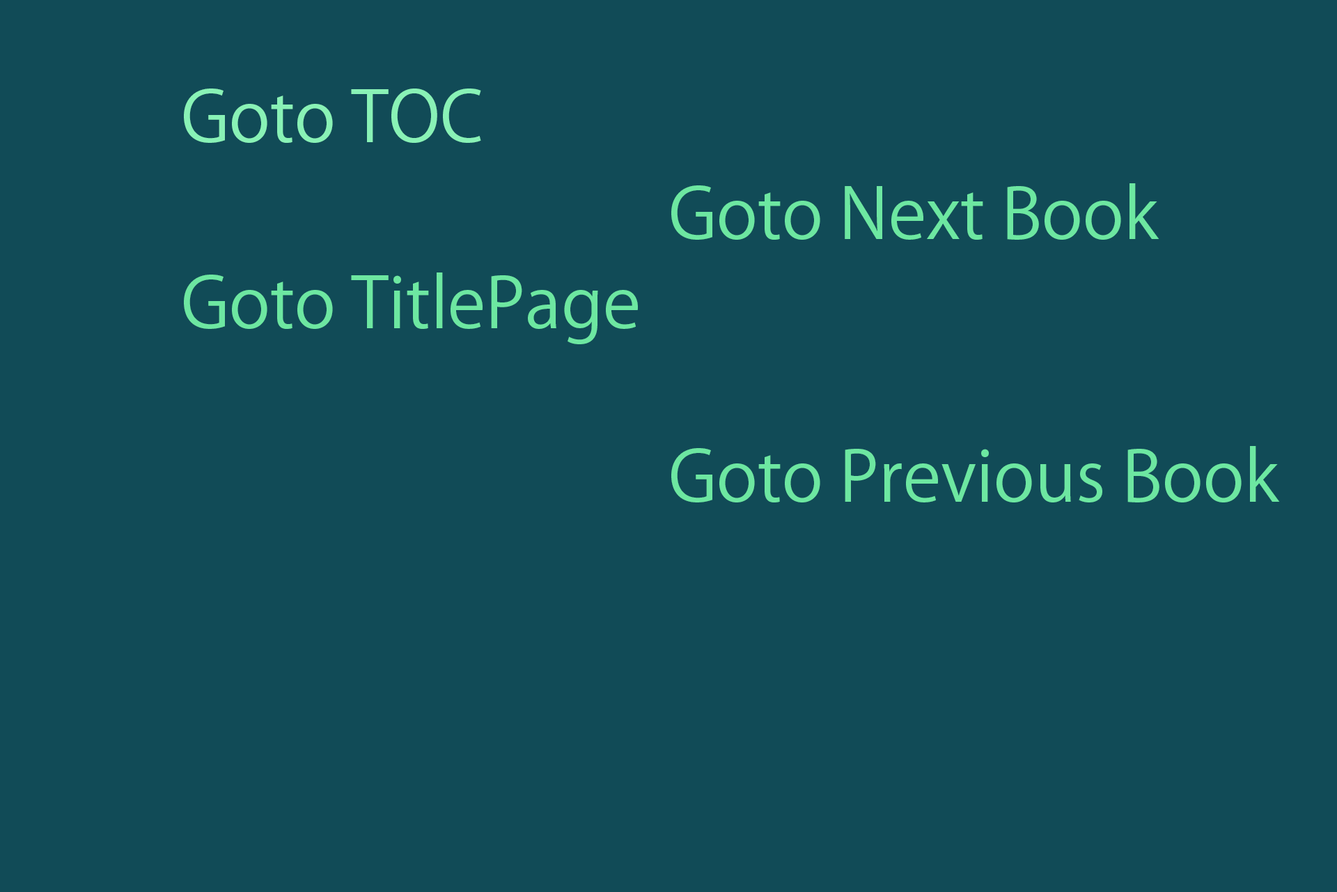
<style>
.page{position:relative;width:1337px;height:892px;background:#114b57}
.page>*{position:absolute;margin:0}
.t1{font:69.7px "KozGoPr6N-Regular";color:#89f2b6}
.t2{font:69.7px "KozGoPr6N-Regular";color:#6de7a1}
</style>
<div class="page">
<p class="t1" style="left:184px;top:88px;width:297px;height:55px">Goto TOC</p>
<p class="t2" style="left:671px;top:183px;width:489px;height:57px">Goto Next Book</p>
<p class="t2" style="left:184px;top:272px;width:454px;height:72px">Goto TitlePage</p>
<p class="t2" style="left:671px;top:446px;width:609px;height:56px">Goto Previous Book</p>
</div>
